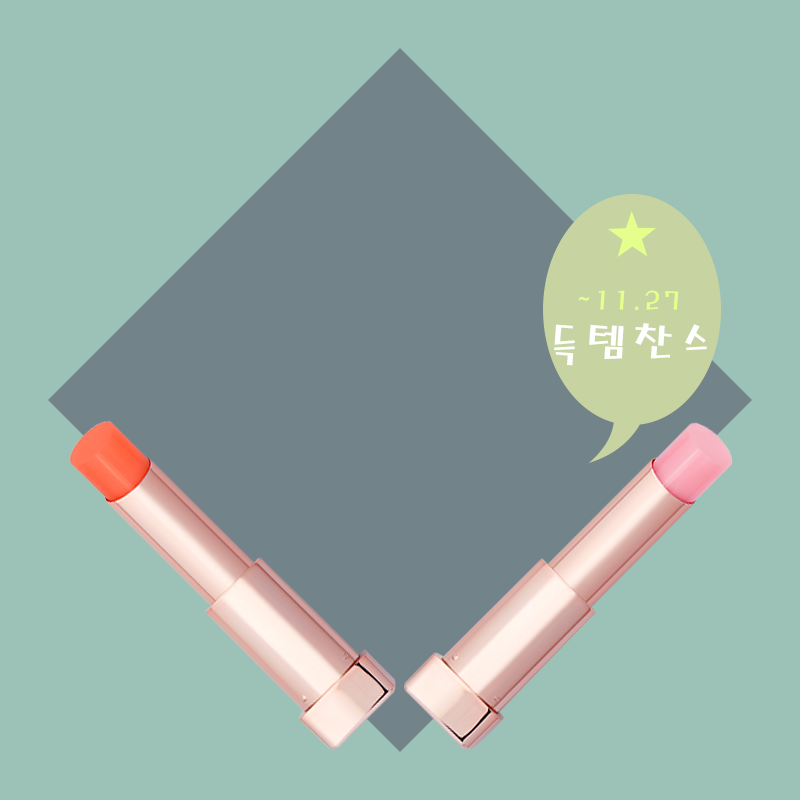
<style>
.page{position:relative;width:800px;height:800px;background:#9cc2b8}
.page>*{position:absolute;margin:0}
.t1{font:27.9px/49.3px "MagicR-HM";letter-spacing:0.14em;color:#e5ff8c}
.t2{font:45.8px/49.3px "MagicR-HM";letter-spacing:0.14em;color:#ffffff}
</style>
<div class="page">
<p class="t1" style="left:554px;top:290px;width:153px;height:76px;text-align:center">~11.27<br><span class="t2">득템찬스</span></p>
</div>
